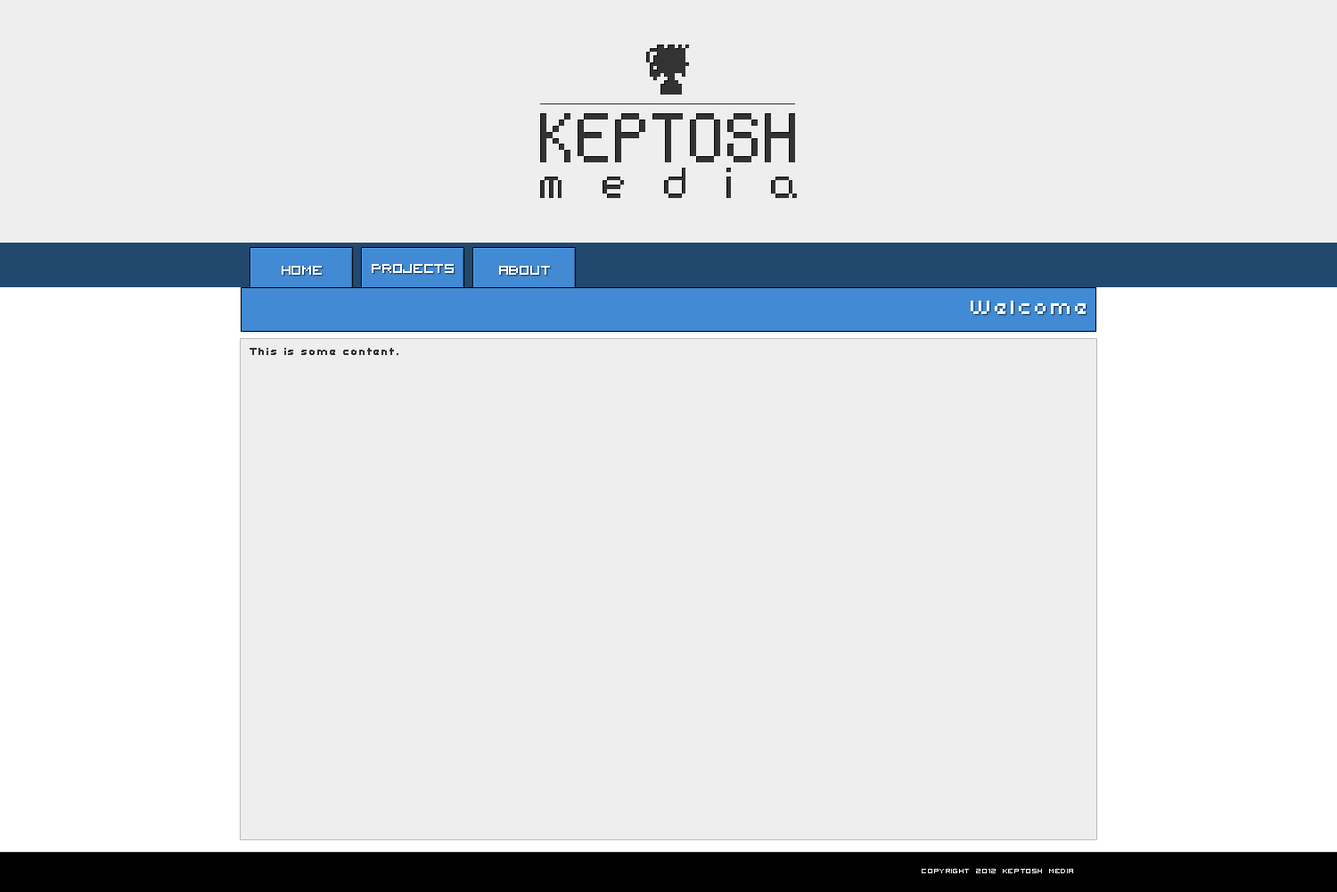
<style>
.page{position:relative;width:1337px;height:892px;background:#eeeeee}
.page>*{position:absolute;margin:0}
.t1{font:62.4px/35.7px "AntsOnALog";color:#333333}
.t2{font:44.6px/35.7px "AntsOnALog";letter-spacing:0.8em;color:#333333}
.t3{font:22.3px "VisitorTT2BRK";color:#ffffff}
.t4{font:21.4px "Uni0554";color:#ffffff}
.t5{font:10.7px "Uni0554";color:#333333}
.t6{font:12.5px "VisitorTT2BRK";color:#ffffff}
</style>
<div class="page">
<p class="t1" style="left:540px;top:113px;width:257px;height:85px;text-align:center">KEPTOSH<br><span class="t2">media</span></p>
<p class="t3" style="left:282px;top:266px;width:40px;height:9px">HOME</p>
<p class="t3" style="left:372px;top:264px;width:82px;height:9px">PROJECTS</p>
<p class="t3" style="left:499px;top:266px;width:51px;height:9px">ABOUT</p>
<p class="t4" style="left:971px;top:300px;width:115px;height:14px">Welcome</p>
<p class="t5" style="left:250px;top:348px;width:149px;height:7px">This is some content.</p>
<p class="t6" style="left:922px;top:868px;width:151px;height:5px">copyright 2012 Keptosh Media</p>
</div>
